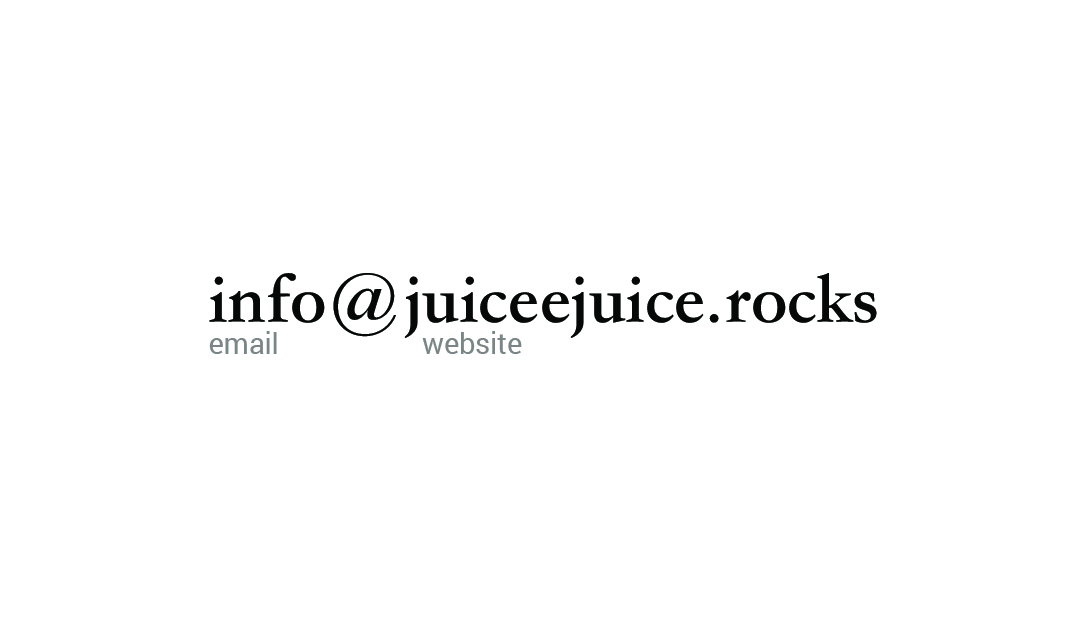
<style>
.page{position:relative;width:1085px;height:635px;background:#ffffff}
.page>*{position:absolute;margin:0}
.t1{font:73.4px "STSongti-TC-Bold";letter-spacing:-0.01em;color:#060808}
.t2{font:29px "Roboto-Regular";letter-spacing:-0.01em;color:#798587}
</style>
<div class="page">
<p class="t1" style="left:209px;top:273px;width:668px;height:65px">info@juiceejuice.rocks</p>
<p class="t2" style="left:209px;top:331px;width:68px;height:23px">email</p>
<p class="t2" style="left:422px;top:331px;width:100px;height:23px">website</p>
</div>
